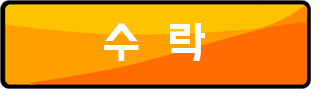
<style>
.page{position:relative;width:322px;height:97px;background:#ff6d00}
.page>*{position:absolute;margin:0}
.t1{font:40px "BMDoHyeon";letter-spacing:0.005em;color:#ffffff}
</style>
<div class="page">
<p class="t1" style="left:104px;top:23px;width:101px;height:38px">수  락</p>
</div>
